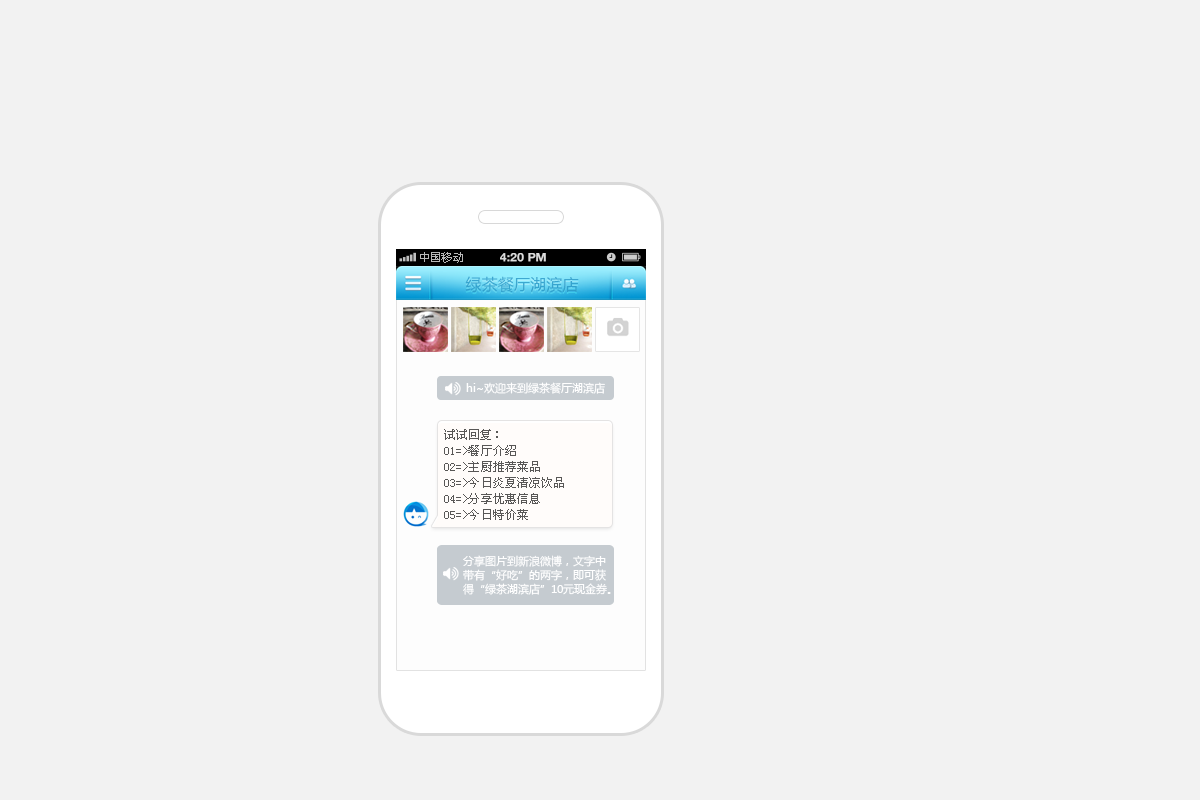
<style>
.page{position:relative;width:1200px;height:800px;background:#f2f2f2}
.page>*{position:absolute;margin:0}
.t1{font:11px "MicrosoftYaHei";color:#b8b8b8}
.t2{font:11.9px "HelveticaNeue-Bold";color:#dddddd;text-transform:uppercase}
.t3{font:16px "MicrosoftYaHei";letter-spacing:0.01em;color:#38a5cf}
.t4{font:11px "MicrosoftYaHei";color:#ffffff}
.t5{font:12px/16px "SimSun";letter-spacing:0.01em;color:#585756}
.t6{font:11px/14px "MicrosoftYaHei";color:#ffffff}
</style>
<div class="page">
<p class="t1" style="left:420px;top:252px;width:43px;height:11px">中国移动</p>
<p class="t2" style="left:500px;top:253px;width:46px;height:9px">4:20 pM</p>
<p class="t3" style="left:465px;top:276px;width:114px;height:17px">绿茶餐厅湖滨店</p>
<p class="t4" style="left:466px;top:382px;width:139px;height:12px">hi~欢迎来到绿茶餐厅湖滨店</p>
<p class="t5" style="left:444px;top:429px;width:120px;height:91px">试试回复：<br>01=&gt;餐厅介绍<br>02=&gt;主厨推荐菜品<br>03=&gt;今日炎夏清凉饮品<br>04=&gt;分享优惠信息<br>05=&gt;今日特价菜</p>
<p class="t6" style="left:463px;top:555px;width:148px;height:40px">分享图片到新浪微博，文字中<br>带有“好吃”的两字，即可获<br>得“绿茶湖滨店”10元现金券。</p>
</div>
